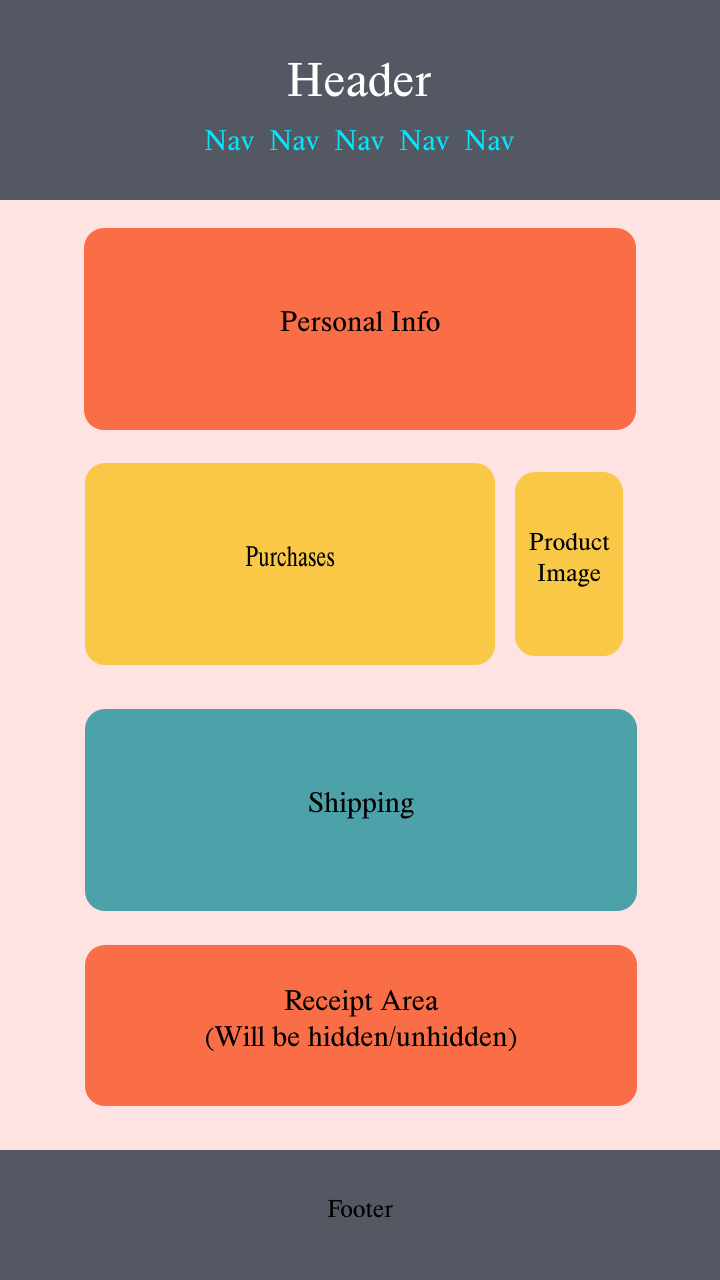
<style>
.page{position:relative;width:720px;height:1280px;background:#ffe3e3}
.page>*{position:absolute;margin:0}
.t1{font:50px "HappyTimesattheIKOB-Regular";color:#ffffff}
.t2{font:30px "HappyTimesattheIKOB-Regular";color:#00e8fc}
.t3{font:30px "HappyTimesattheIKOB-Regular";color:#000000}
.t4{font:25.9px "HappyTimesattheIKOB-Regular";color:#000000}
.t5{font:30px "HappyTimesattheIKOB-Regular";color:#000000;scale:0.74 1}
</style>
<div class="page">
<p class="t1" style="left:288px;top:62px;width:144px;height:35px">Header</p>
<p class="t2" style="left:205px;top:130px;width:310px;height:21px">Nav  Nav  Nav  Nav  Nav</p>
<p class="t3" style="left:280px;top:310px;width:160px;height:22px">Personal Info</p>
<p class="t4" style="left:529px;top:532px;width:81px;height:55px;text-align:center">Product Image</p>
<p class="t5" style="left:245px;top:546px;width:90px;height:21px">Purchases</p>
<p class="t3" style="left:309px;top:792px;width:105px;height:27px">Shipping</p>
<p class="t3" style="left:205px;top:989px;width:312px;height:63px;text-align:center">Receipt Area<br>(Will be hidden/unhidden)</p>
<p class="t4" style="left:328px;top:1199px;width:65px;height:19px">Footer</p>
</div>
